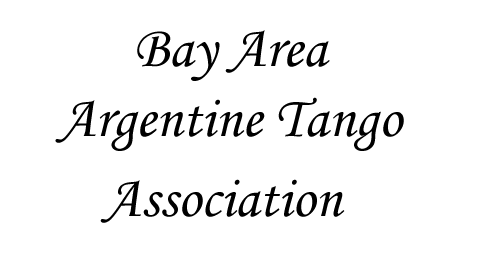
<style>
.page{position:relative;width:480px;height:270px;background:#ffffff}
.page>*{position:absolute;margin:0}
.t1{font:58.3px "MonotypeCorsiva";color:#000000}
</style>
<div class="page">
<p class="t1" style="left:55px;top:30px;width:349px;height:193px;text-align:center">Bay Area<br>Argentine Tango<br>Association</p>
</div>
